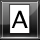
<style>
.page{position:relative;width:40px;height:40px;background:#ffffff}
.page>*{position:absolute;margin:0}
.t1{font:24px "LucidaSans";color:#000000}
</style>
<div class="page">
<p class="t1" style="left:11px;top:10px;width:17px;height:18px">A</p>
</div>
